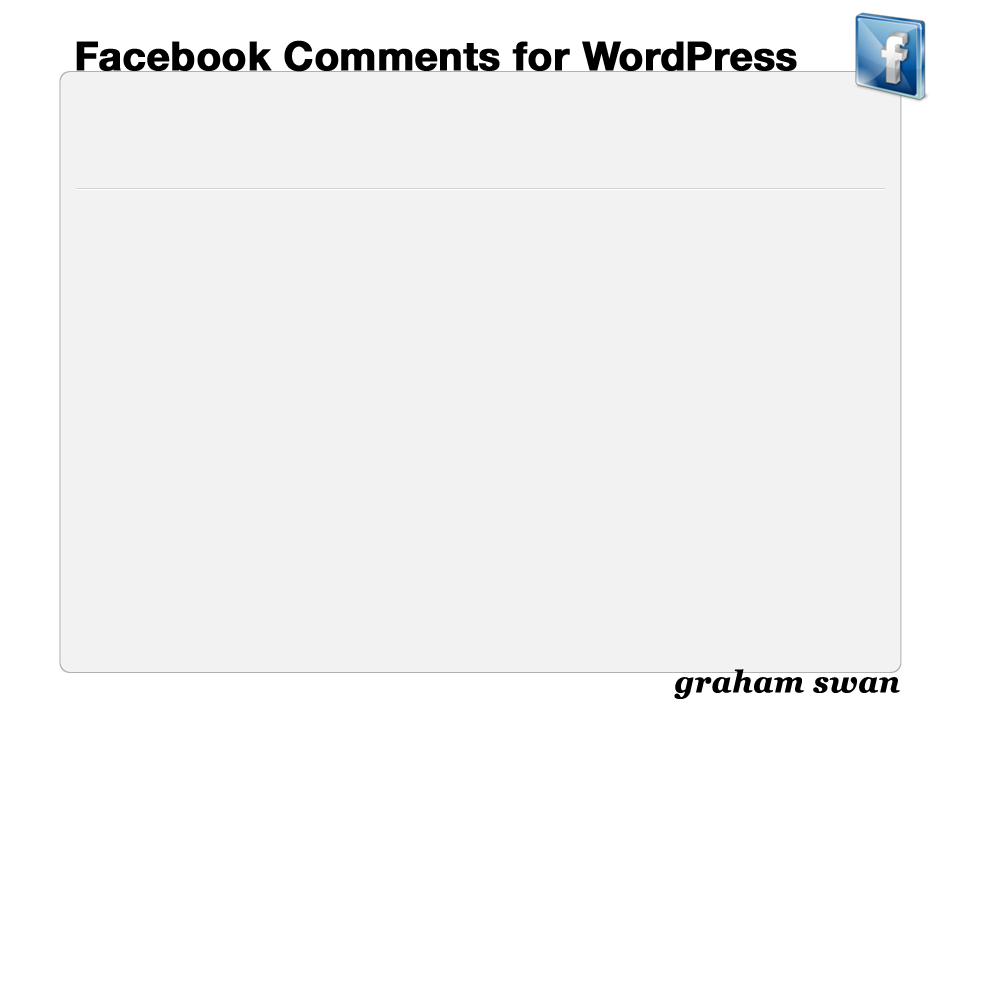
<style>
.page{position:relative;width:1000px;height:1000px;background:#f2f2f2}
.page>*{position:absolute;margin:0}
.t1{font:40px "HelveticaNeue-Bold";color:#000000;font-weight:bold}
.t2{font:30px "Georgia-BoldItalic";color:#000000;font-weight:bold}
</style>
<div class="page">
<p class="t1" style="left:76px;top:40px;width:721px;height:32px">Facebook Comments for WordPress</p>
<p class="t2" style="left:674px;top:669px;width:226px;height:30px">graham swan</p>
</div>
